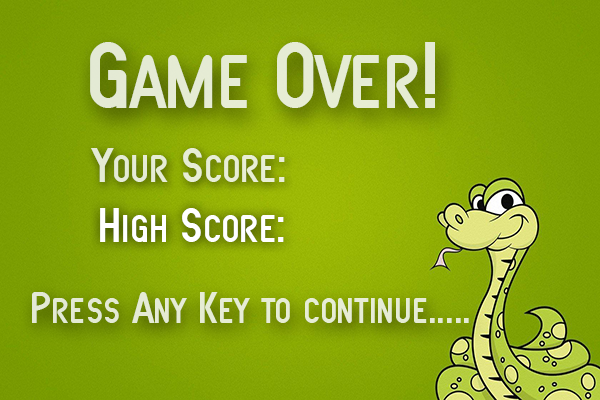
<style>
.page{position:relative;width:600px;height:400px}
.page>*{position:absolute;margin:0}
.t1{font:98.7px "SFAtarianSystem";color:#e5ebd4}
.t2{font:50.7px "SFAtarianSystem";color:#e7edd4}
.t3{font:50.7px "SFAtarianSystem";color:#ffffff}
.t4{font:47px "SFAtarianSystem";color:#e5ebd4}
</style>
<div class="page">
<p class="t1" style="left:90px;top:42px;width:345px;height:66px">Game Over!</p>
<p class="t2" style="left:91px;top:148px;width:194px;height:34px">Your Score:</p>
<p class="t3" style="left:100px;top:208px;width:184px;height:34px">High Score:</p>
<p class="t4" style="left:32px;top:292px;width:437px;height:31px">Press Any Key to continue.....</p>
</div>
